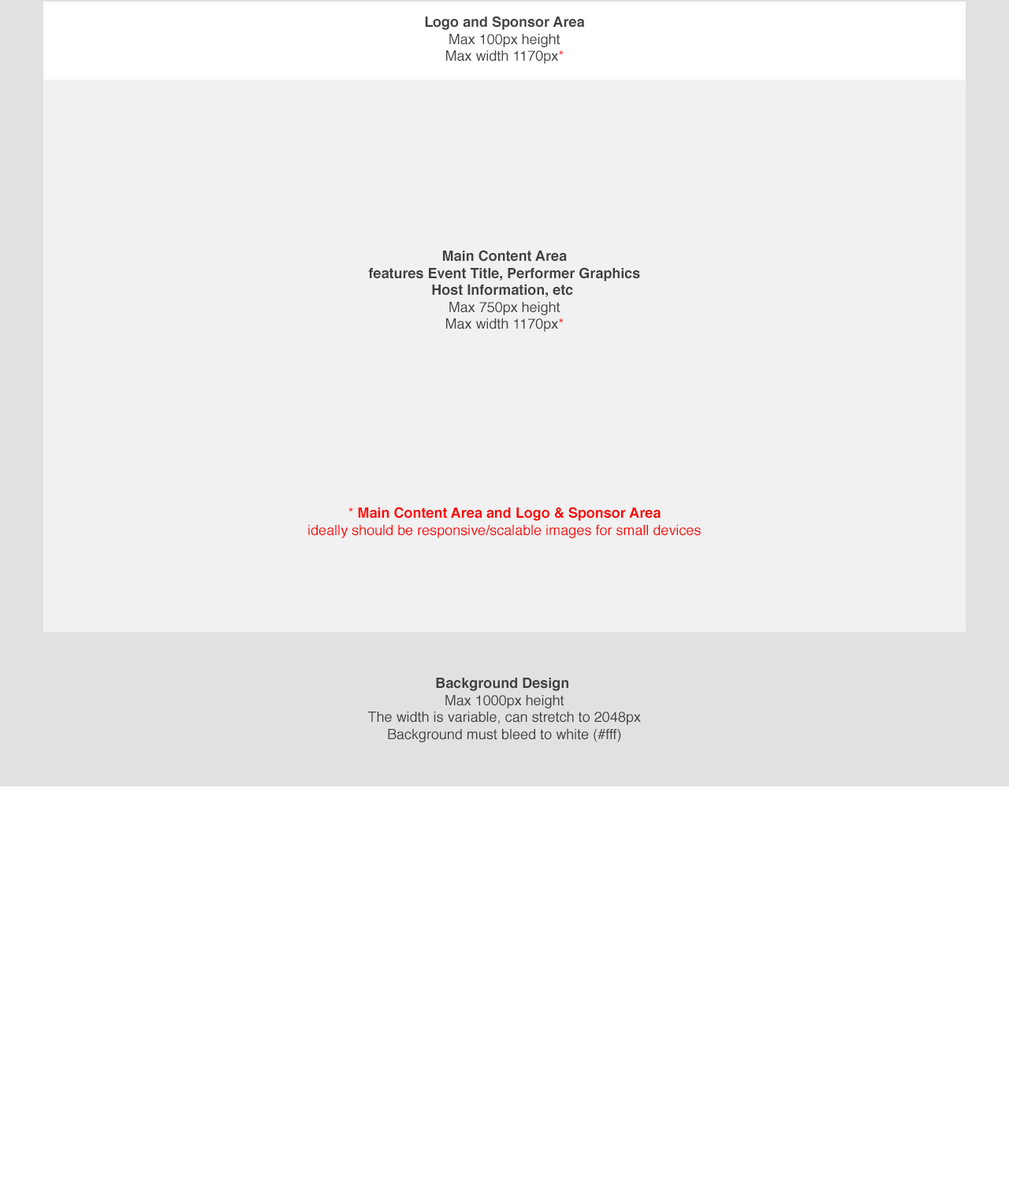
<style>
.page{position:relative;width:1009px;height:1182px;background:#f1f1f1}
.page>*{position:absolute;margin:0}
.t1{font:14.2px "Helvetica";color:#404040}
.t2{font:14.2px "Helvetica-Bold";color:#404040}
.t3{font:14.2px "Helvetica";color:#ff0000}
.t4{font:14.2px "Helvetica-Bold";color:#ff0000}
</style>
<div class="page">
<p class="t1" style="left:425px;top:16px;width:160px;height:48px;text-align:center"><span class="t2">Logo and Sponsor Area<br></span>Max 100px height<br>Max width 1170px<span class="t3">*</span></p>
<p class="t2" style="left:368px;top:250px;width:272px;height:82px;text-align:center">Main Content Area<br>features Event Title, Performer Graphics<br>Host Information, etc <br><span class="t1">Max 750px height<br>Max width 1170px</span><span class="t3">*</span></p>
<p class="t3" style="left:308px;top:507px;width:393px;height:31px;text-align:center">* <span class="t4">Main Content Area and Logo &amp; Sponsor Area<br></span>ideally should be responsive/scalable images for small devices</p>
<p class="t1" style="left:368px;top:678px;width:273px;height:64px;text-align:center"><span class="t2">Background Design <br></span>Max 1000px height<br>The width is variable, can stretch to 2048px<br>Background must bleed to white (#fff)</p>
</div>
